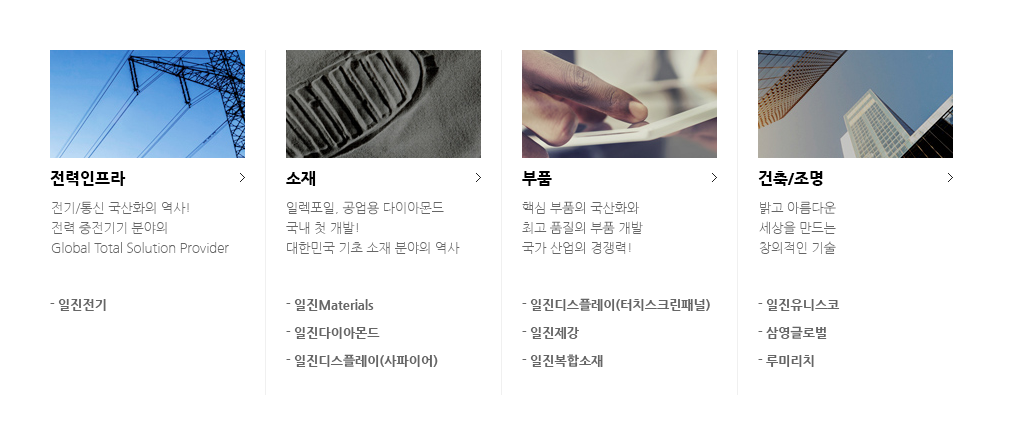
<style>
.page{position:relative;width:1033px;height:445px;background:#ffffff}
.page>*{position:absolute;margin:0}
.t1{font:16px "NanumGothicExtraBold";color:#000000}
.t2{font:13px/20px "NanumGothicLight";color:#666666}
.t3{font:13px "NanumGothicExtraBold";color:#666666}
.t4{font:13px/28px "NanumGothicExtraBold";color:#666666}
</style>
<div class="page">
<p class="t1" style="left:50px;top:171px;width:76px;height:15px">전력인프라</p>
<p class="t1" style="left:286px;top:171px;width:30px;height:15px">소재</p>
<p class="t1" style="left:522px;top:171px;width:30px;height:15px">부품</p>
<p class="t1" style="left:758px;top:171px;width:65px;height:15px">건축/조명</p>
<p class="t2" style="left:51px;top:201px;width:178px;height:52px;text-align:justify">전기/통신 국산화의 역사!<br>전력 중전기기 분야의<br>Global Total Solution Provider</p>
<p class="t2" style="left:286px;top:201px;width:174px;height:53px;text-align:justify">일렉포일, 공업용 다이아몬드<br>국내 첫 개발!<br>대한민국 기초 소재 분야의 역사</p>
<p class="t2" style="left:522px;top:201px;width:121px;height:53px;text-align:justify">핵심 부품의 국산화와<br>최고 품질의 부품 개발<br>국가 산업의 경쟁력!</p>
<p class="t2" style="left:759px;top:201px;width:77px;height:53px;text-align:justify">밝고 아름다운<br>세상을 만드는<br>창의적인 기술</p>
<p class="t3" style="left:58px;top:299px;width:48px;height:12px">일진전기</p>
<p class="t4" style="left:294px;top:299px;width:144px;height:68px;text-align:justify">일진Materials<br>일진다이아몬드<br>일진디스플레이(사파이어)</p>
<p class="t4" style="left:530px;top:298px;width:180px;height:69px;text-align:justify">일진디스플레이(터치스크린패널)<br>일진제강<br>일진복합소재</p>
<p class="t4" style="left:766px;top:299px;width:74px;height:68px;text-align:justify">일진유니스코<br>삼영글로벌<br>루미리치</p>
</div>
